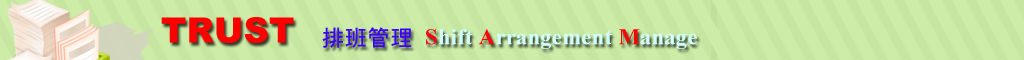
<style>
.page{position:relative;width:1024px;height:60px;background:#cceca7}
.page>*{position:absolute;margin:0}
.t1{font:34.9px "Arial-Black";letter-spacing:0.01em;color:#ff0000}
.t2{font:22.7px "TimesNewRomanPS-BoldMT";letter-spacing:0.01em;color:#cffeff}
.t3{font:22.7px "HayHeavy";letter-spacing:0.01em;color:#3c01fc}
.t4{font:22.7px "TimesNewRomanPS-BoldMT";letter-spacing:0.01em;color:#fe0018}
.t5{font:22.7px "TimesNewRomanPS-BoldMT";letter-spacing:0.01em;color:#fe040a}
.t6{font:22.7px "TimesNewRomanPS-BoldMT";letter-spacing:0.01em;color:#fd0202}
</style>
<div class="page">
<p class="t1" style="left:161px;top:17px;width:133px;height:26px">TRUST</p>
<p class="t2" style="left:322px;top:27px;width:375px;height:22px"><span class="t3">排班管理 </span><span class="t4">S</span>hift <span class="t5">A</span>rrangement <span class="t6">M</span>anage</p>
</div>
